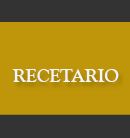
<style>
.page{position:relative;width:130px;height:138px;background:#bf9609}
.page>*{position:absolute;margin:0}
.t1{font:18.7px "GoudyOldStyleT-Bold";color:#f5f5f5}
</style>
<div class="page">
<p class="t1" style="left:12px;top:69px;width:107px;height:13px">RECETARIO</p>
</div>
